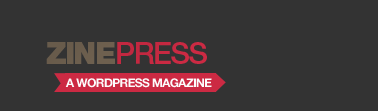
<style>
.page{position:relative;width:378px;height:111px;background:#333333}
.page>*{position:absolute;margin:0}
.t1{font:30px "HelveticaNeue-Black";letter-spacing:-0.05em;color:#6e604f}
.t2{font:30px "HelveticaNeue-Medium";letter-spacing:-0.05em;color:#cc2a43}
.t3{font:12px "HelveticaNeue-Bold";letter-spacing:-0.05em;color:#fcfcfc;text-transform:uppercase}
</style>
<div class="page">
<p class="t1" style="left:46px;top:42px;width:69px;height:22px">ZINE</p>
<p class="t2" style="left:117px;top:42px;width:90px;height:22px">PRESS</p>
<p class="t3" style="left:65px;top:78px;width:147px;height:10px">A Wordpress Magazine</p>
</div>
